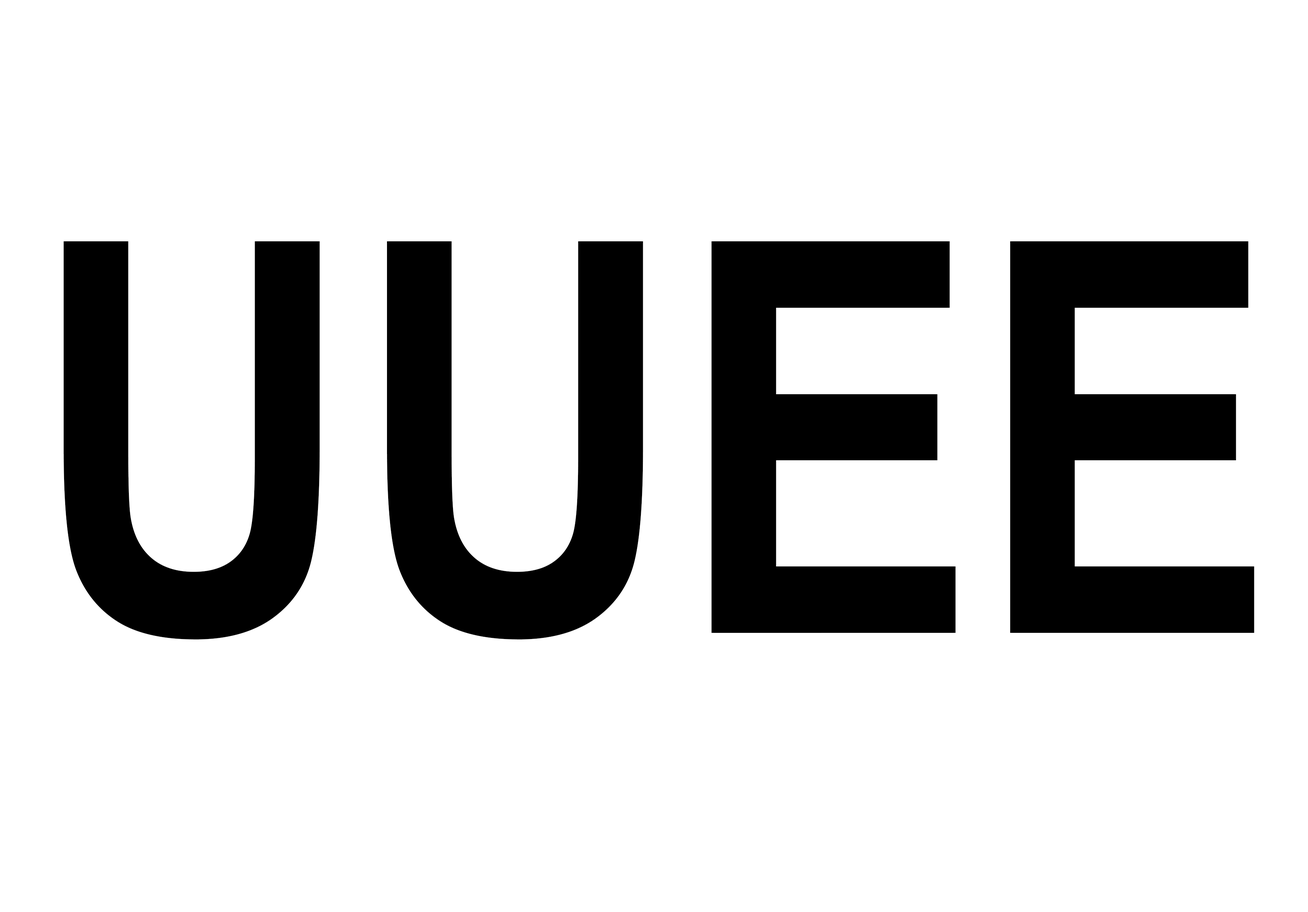
<style>
.page{position:relative;width:1308px;height:912px;background:#ffffff}
.page>*{position:absolute;margin:0}
.t1{font:546.7px "ArialNarrow-Bold";color:#000000}
</style>
<div class="page">
<p class="t1" style="left:64px;top:241px;width:1191px;height:398px">UUEE</p>
</div>
